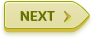
<style>
.page{position:relative;width:94px;height:39px}
.page>*{position:absolute;margin:0}
.t1{font:13px "DiavloBlack-Regular";color:#687300;text-transform:uppercase}
</style>
<div class="page">
<p class="t1" style="left:20px;top:11px;width:35px;height:10px">next</p>
</div>
